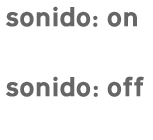
<style>
.page{position:relative;width:153px;height:140px;background:#ffffff}
.page>*{position:absolute;margin:0}
.t1{font:26px "Transport-Heavy-Regular";color:#666666}
</style>
<div class="page">
<p class="t1" style="left:5px;top:6px;width:132px;height:21px">sonido: on</p>
<p class="t1" style="left:5px;top:76px;width:139px;height:21px">sonido: off</p>
</div>
